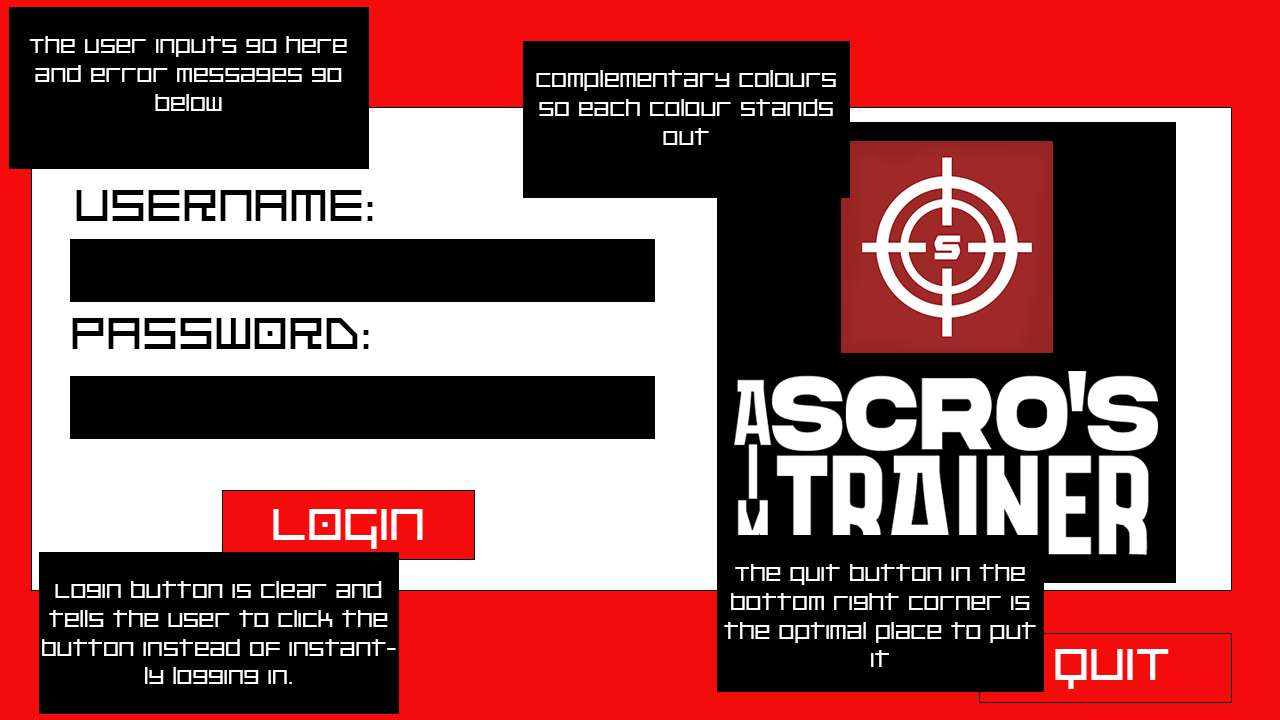
<style>
.page{position:relative;width:1280px;height:720px;background:#000000}
.page>*{position:absolute;margin:0}
.t1{font:24px "PlatinumBeatBTN";color:#ffffff}
.t2{font:55px "PlatinumBeatBTN";color:#000000}
.t3{font:55px "PlatinumBeatBTN";color:#ffffff}
</style>
<div class="page">
<p class="t1" style="left:29px;top:36px;width:318px;height:75px;text-align:center">The user inputs go here and error messages go below</p>
<p class="t1" style="left:536px;top:70px;width:300px;height:75px;text-align:center">Complementary colours so each colour stands out</p>
<p class="t2" style="left:76px;top:190px;width:297px;height:31px">USERNAME:</p>
<p class="t2" style="left:72px;top:318px;width:297px;height:31px">PASSWORD:</p>
<p class="t3" style="left:273px;top:509px;width:150px;height:40px">LOGIN</p>
<p class="t1" style="left:724px;top:564px;width:312px;height:103px;text-align:center">The quit button in the bottom right corner is the optimal place to put it</p>
<p class="t1" style="left:42px;top:581px;width:354px;height:103px;text-align:center">Login button is clear and tells the user to click the button instead of instantly logging in.</p>
<p class="t3" style="left:1055px;top:649px;width:114px;height:40px">QUIT</p>
</div>
